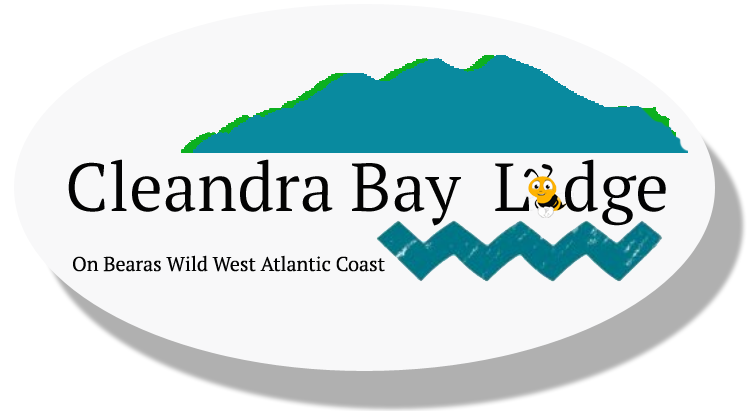
<style>
.page{position:relative;width:755px;height:411px;background:#f8f8f9}
.page>*{position:absolute;margin:0}
.t1{font:68px "PTSerifPro-Book";color:#030303}
.t2{font:20px "PTSerifPro-Book";color:#030303}
</style>
<div class="page">
<p class="t1" style="left:68px;top:159px;width:598px;height:67px">Cleandra Bay  L  dge</p>
<p class="t2" style="left:73px;top:255px;width:312px;height:17px">On Bearas Wild West Atlantic Coast</p>
</div>
